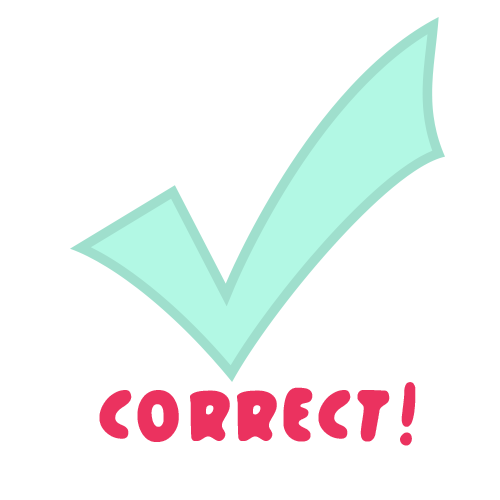
<style>
.page{position:relative;width:500px;height:500px;background:#ffffff}
.page>*{position:absolute;margin:0}
.t1{font:85px "BomberBalloon";letter-spacing:0.08em;color:#eb325f}
</style>
<div class="page">
<p class="t1" style="left:99px;top:382px;width:317px;height:64px">correct!</p>
</div>
